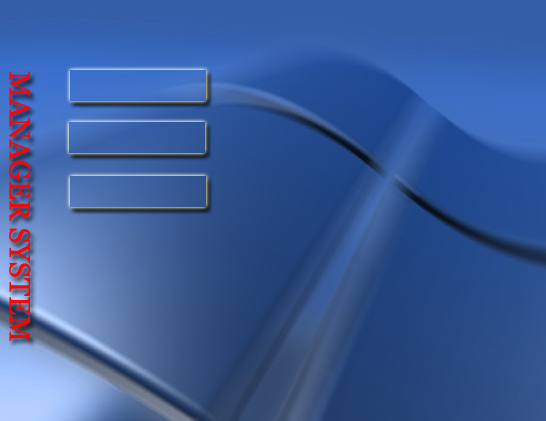
<style>
.page{position:relative;width:546px;height:421px}
.page>*{position:absolute;margin:0}
.t1{font:29.2px "Georgia";color:#fd0404}
</style>
<div class="page">
<p class="t1" style="left:9px;top:71px;width:22px;height:270px">MANAGER SYSTEM统</p>
</div>
